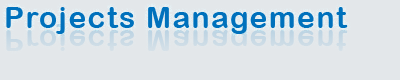
<style>
.page{position:relative;width:400px;height:80px;background:#e3e7ea}
.page>*{position:absolute;margin:0}
.t1{font:30px "ArialRoundedMTBold";letter-spacing:0.05em;color:#0071bc}
</style>
<div class="page">
<p class="t1" style="left:6px;top:7px;width:342px;height:27px">Projects Management</p>
</div>
